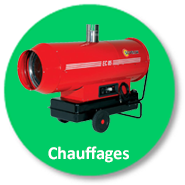
<style>
.page{position:relative;width:185px;height:185px;background:#00cc66}
.page>*{position:absolute;margin:0}
.t1{font:18px "Calibri-Bold";color:#ffffff}
</style>
<div class="page">
<p class="t1" style="left:48px;top:146px;width:81px;height:17px">Chauffages</p>
</div>
